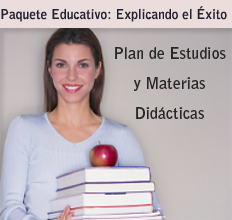
<style>
.page{position:relative;width:232px;height:220px}
.page>*{position:absolute;margin:0}
.t1{font:13.5px "BellGothicStd-Bold";color:#252232}
.t2{font:16px/30px "BellGothicStd-Bold";color:#282829}
</style>
<div class="page">
<p class="t1" style="left:1px;top:6px;width:226px;height:16px">Paquete Educativo: Explicando el Éxito</p>
<p class="t2" style="left:115px;top:47px;width:111px;height:72px;text-align:center">Plan de Estudios<br>y Materias<br>Didácticas</p>
</div>
